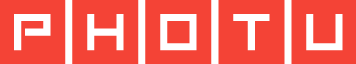
<style>
.page{position:relative;width:356px;height:64px;background:#f44336}
.page>*{position:absolute;margin:0}
.t1{font:116.9px "Inversionz";color:#f44336}
</style>
<div class="page">
<p class="t1" style="left:0px;top:0px;width:358px;height:65px">photu</p>
</div>
